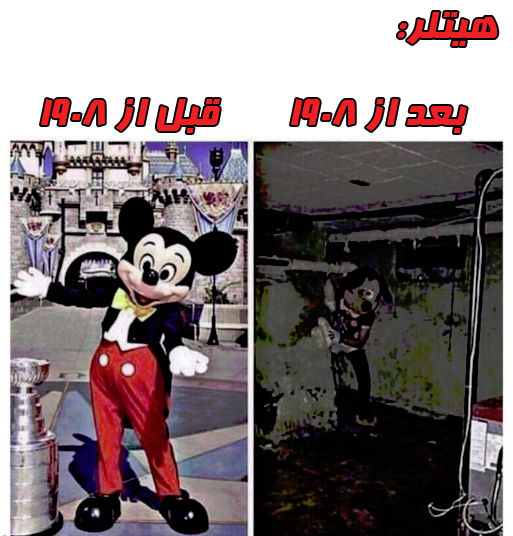
<style>
.page{position:relative;width:513px;height:536px;background:#ffffff}
.page>*{position:absolute;margin:0}
.t1{font:45px "Far.Farnaz";color:#ed2024}
</style>
<div class="page">
<p class="t1" style="left:398px;top:12px;width:100px;height:34px">هیتلر:</p>
<p class="t1" style="left:41px;top:99px;width:179px;height:34px">قبل از 1908</p>
<p class="t1" style="left:291px;top:99px;width:176px;height:34px">بعد از 1908</p>
</div>
